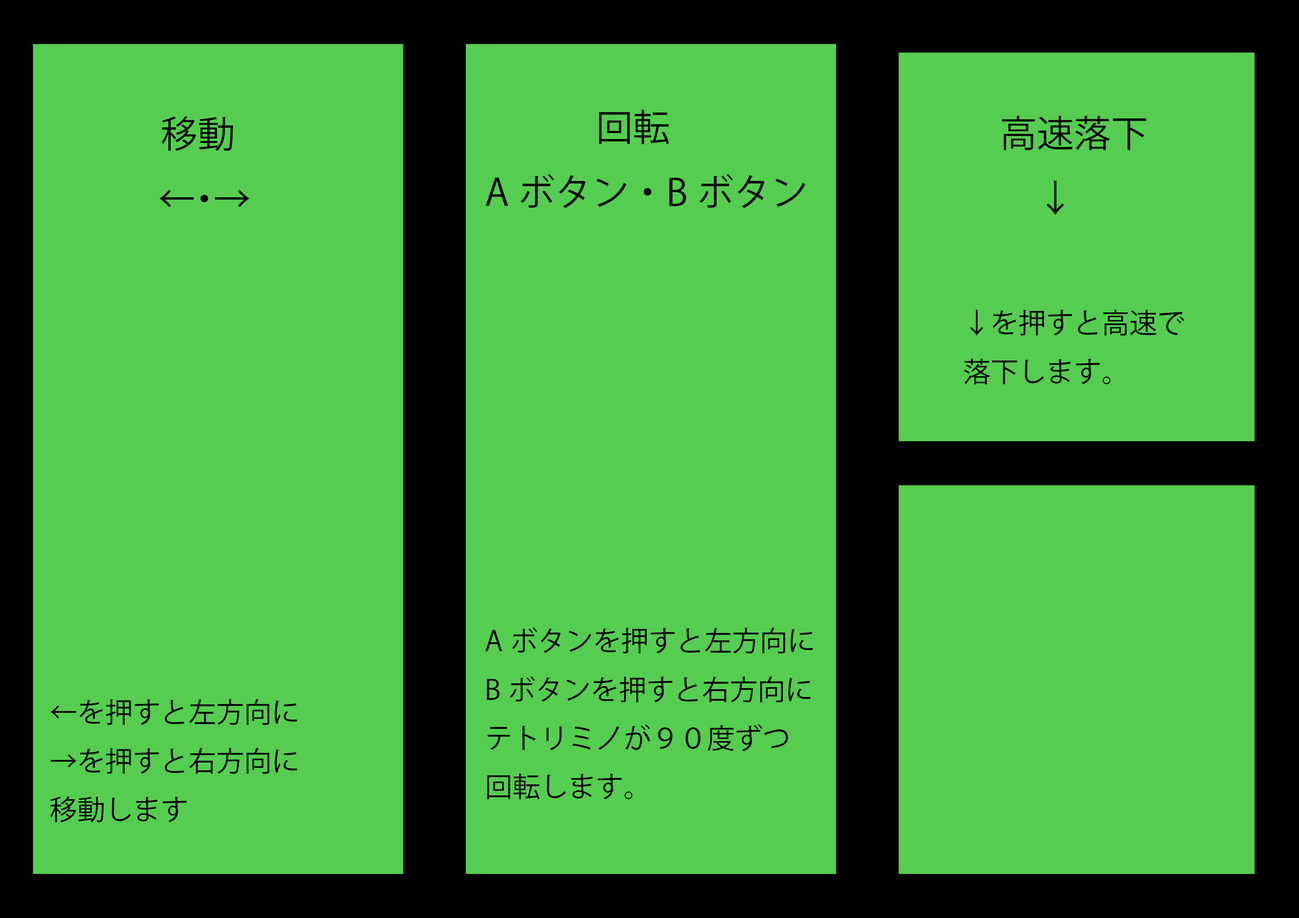
<style>
.page{position:relative;width:1299px;height:918px;background:#55cd50}
.page>*{position:absolute;margin:0}
.t1{font:27.8px "KozGoPr6N-Regular";color:#000000}
.t2{font:37px "KozGoPr6N-Regular";color:#000000}
</style>
<div class="page">
<p class="t1" style="left:485px;top:110px;width:328px;height:690px"><span class="t2">　　　回転<br>Aボタン・Bボタン<br><br><br><br><br><br><br></span>Aボタンを押すと左方向に<br>Bボタンを押すと右方向に<br>テトリミノが９０度ずつ<br>回転します。</p>
<p class="t1" style="left:50px;top:116px;width:247px;height:707px"><span class="t2">　　　移動　<br>　　    ←・→<br><br><br><br><br><br><br><br></span>←を押すと左方向に<br>→を押すと右方向に<br>移動します</p>
<p class="t1" style="left:964px;top:116px;width:220px;height:269px"><span class="t2">　高速落下<br>　　↓<br><br></span>↓を押すと高速で<br>落下します。</p>
</div>
